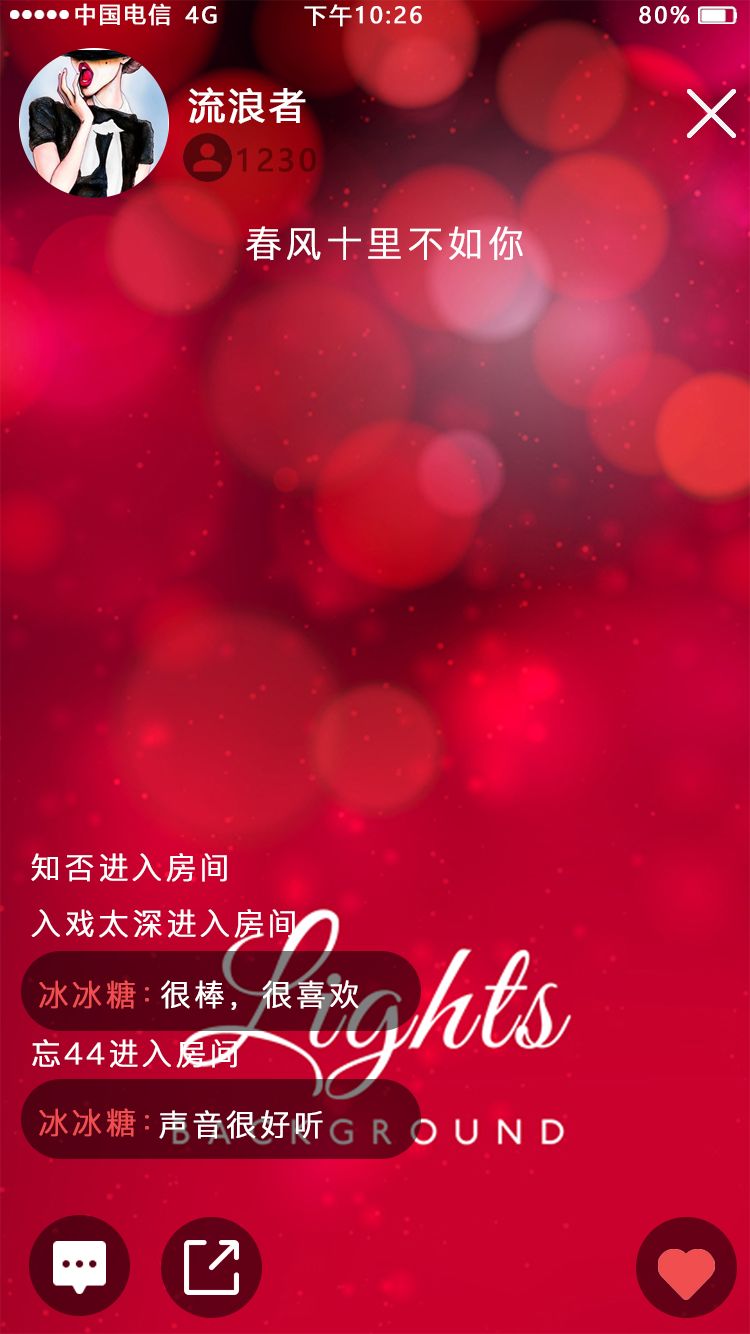
<style>
.page{position:relative;width:750px;height:1334px}
.page>*{position:absolute;margin:0}
.t1{font:22px "MicrosoftYaHei";letter-spacing:0.1em;color:#ffffff;text-transform:uppercase;font-weight:bold}
.t2{font:36px "MicrosoftYaHei";letter-spacing:0.1em;color:#ffffff;text-transform:uppercase;font-weight:bold}
.t3{font:30px "MicrosoftYaHei";letter-spacing:0.1em;color:#630306;text-transform:uppercase;font-weight:bold}
.t4{font:36px "PingFang-SC-Regular";letter-spacing:0.1em;color:#ffffff;text-transform:uppercase;font-weight:bold}
.t5{font:30px "PingFang-SC-Regular";letter-spacing:0.1em;color:#ffffff;text-transform:uppercase;font-weight:bold}
.t6{font:30px "PingFang-SC-Regular";letter-spacing:0.1em;color:#f04e4f;text-transform:uppercase;font-weight:bold}
</style>
<div class="page">
<p class="t1" style="left:75px;top:3px;width:96px;height:23px">中国电信</p>
<p class="t1" style="left:185px;top:6px;width:32px;height:18px">4G</p>
<p class="t1" style="left:304px;top:4px;width:118px;height:23px">下午10:26</p>
<p class="t1" style="left:639px;top:6px;width:51px;height:18px">80%</p>
<p class="t2" style="left:188px;top:87px;width:118px;height:37px">流浪者</p>
<p class="t3" style="left:237px;top:148px;width:79px;height:24px">1230</p>
<p class="t4" style="left:246px;top:226px;width:277px;height:35px">春风十里不如你</p>
<p class="t5" style="left:31px;top:853px;width:196px;height:29px">知否进入房间</p>
<p class="t5" style="left:31px;top:909px;width:264px;height:29px">入戏太深进入房间</p>
<p class="t6" style="left:39px;top:980px;width:110px;height:29px">冰冰糖：</p>
<p class="t5" style="left:161px;top:980px;width:198px;height:30px">很棒，很喜欢</p>
<p class="t5" style="left:32px;top:1039px;width:205px;height:29px">忘44进入房间</p>
<p class="t6" style="left:39px;top:1108px;width:110px;height:29px">冰冰糖：</p>
<p class="t5" style="left:159px;top:1110px;width:164px;height:29px">声音很好听</p>
</div>
